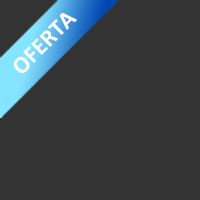
<style>
.page{position:relative;width:200px;height:200px;background:#333333}
.page>*{position:absolute;margin:0}
.t1{font:24px "Calibri-Bold";color:#ffffff}
</style>
<div class="page">
<p class="t1" style="left:13px;top:13px;width:64px;height:60px;rotate:-45deg">OFERTA</p>
</div>
